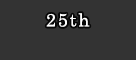
<style>
.page{position:relative;width:136px;height:60px;background:#333333}
.page>*{position:absolute;margin:0}
.t1{font:18px "Century";letter-spacing:0.1em;color:#ffffff}
</style>
<div class="page">
<p class="t1" style="left:46px;top:13px;width:44px;height:14px">25th</p>
</div>
